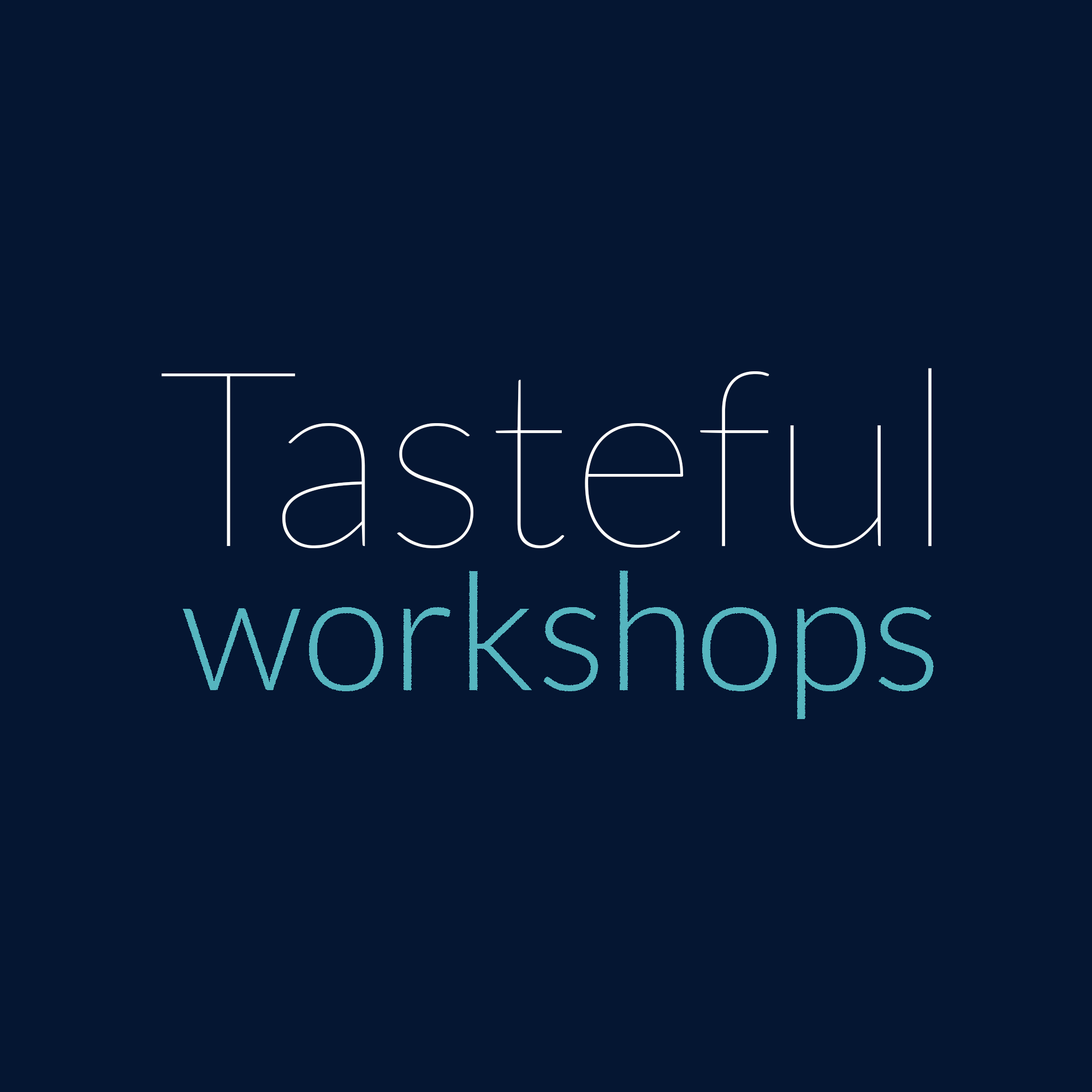
<style>
.page{position:relative;width:1092px;height:1092px;background:#051632}
.page>*{position:absolute;margin:0}
.t1{font:246.6px "Lato-Hairline";color:#ffffff}
.t2{font:163.8px "Lato-Light";color:#56b5bf}
</style>
<div class="page">
<p class="t1" style="left:162px;top:368px;width:769px;height:180px">Tasteful</p>
<p class="t2" style="left:183px;top:571px;width:751px;height:148px">workshops</p>
</div>
